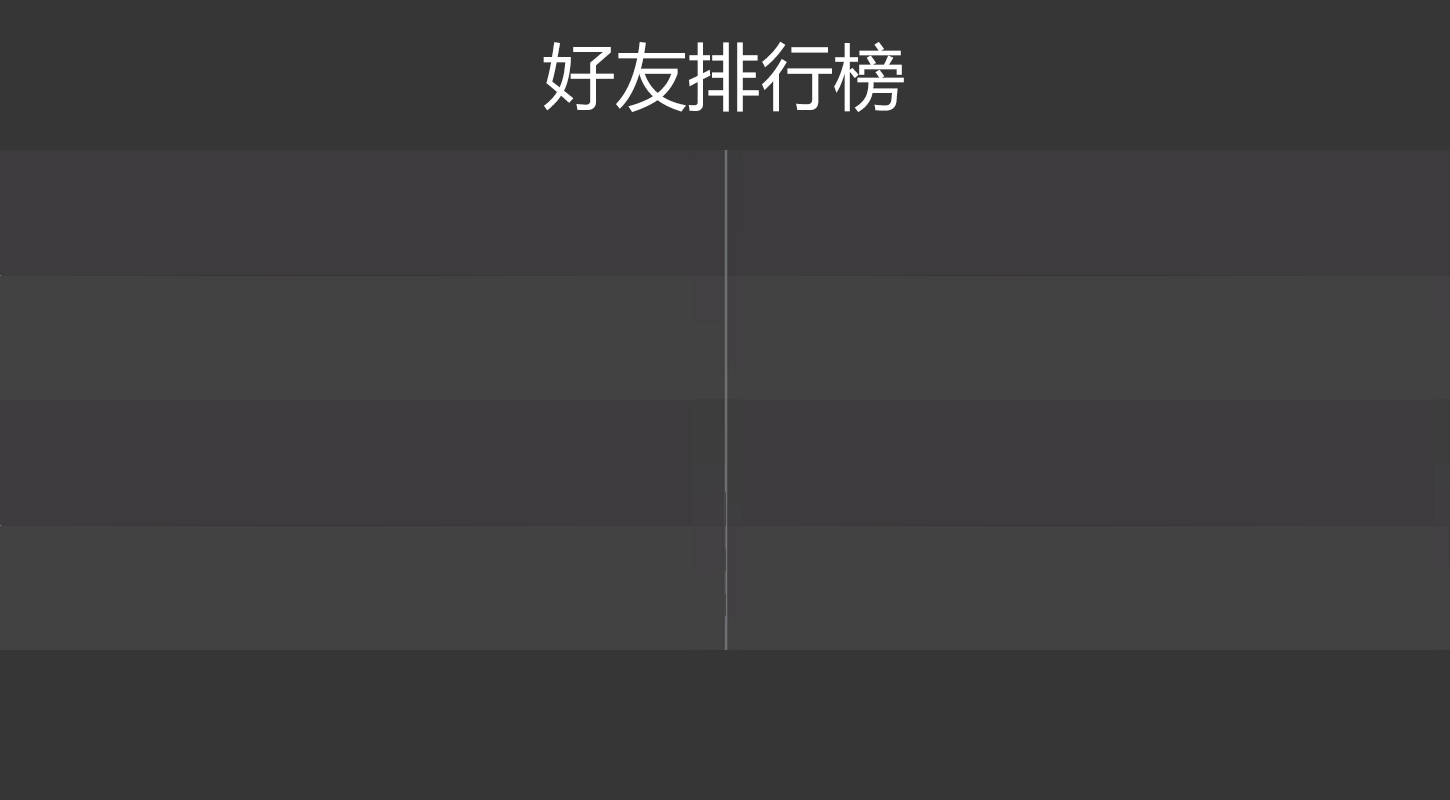
<style>
.page{position:relative;width:1450px;height:800px;background:#363636}
.page>*{position:absolute;margin:0}
.t1{font:72px "MicrosoftYaHei";letter-spacing:0.01em;color:#ffffff}
</style>
<div class="page">
<p class="t1" style="left:543px;top:41px;width:361px;height:71px">好友排行榜</p>
</div>
